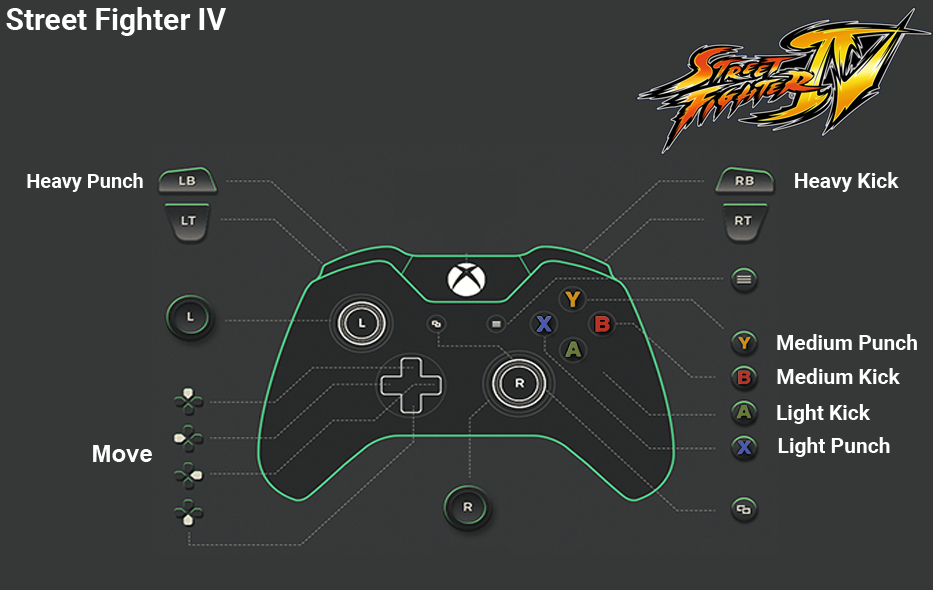
<style>
.page{position:relative;width:933px;height:590px;background:#363838}
.page>*{position:absolute;margin:0}
.t1{font:30px "Roboto-Bold";color:#ffffff}
.t2{font:20px "Roboto-Bold";color:#ffffff}
.t3{font:21px "Roboto-Bold";color:#ffffff}
.t4{font:24px "Arial-BoldMT";color:#fefefe}
</style>
<div class="page">
<p class="t1" style="left:6px;top:7px;width:220px;height:29px">Street Fighter IV</p>
<p class="t2" style="left:27px;top:173px;width:116px;height:19px">Heavy Punch</p>
<p class="t3" style="left:795px;top:172px;width:104px;height:20px">Heavy Kick</p>
<p class="t3" style="left:777px;top:334px;width:140px;height:16px">Medium Punch</p>
<p class="t3" style="left:777px;top:368px;width:123px;height:16px">Medium Kick</p>
<p class="t3" style="left:777px;top:404px;width:94px;height:20px">Light Kick</p>
<p class="t3" style="left:778px;top:437px;width:112px;height:20px">Light Punch</p>
<p class="t4" style="left:93px;top:445px;width:59px;height:17px">Move</p>
</div>
